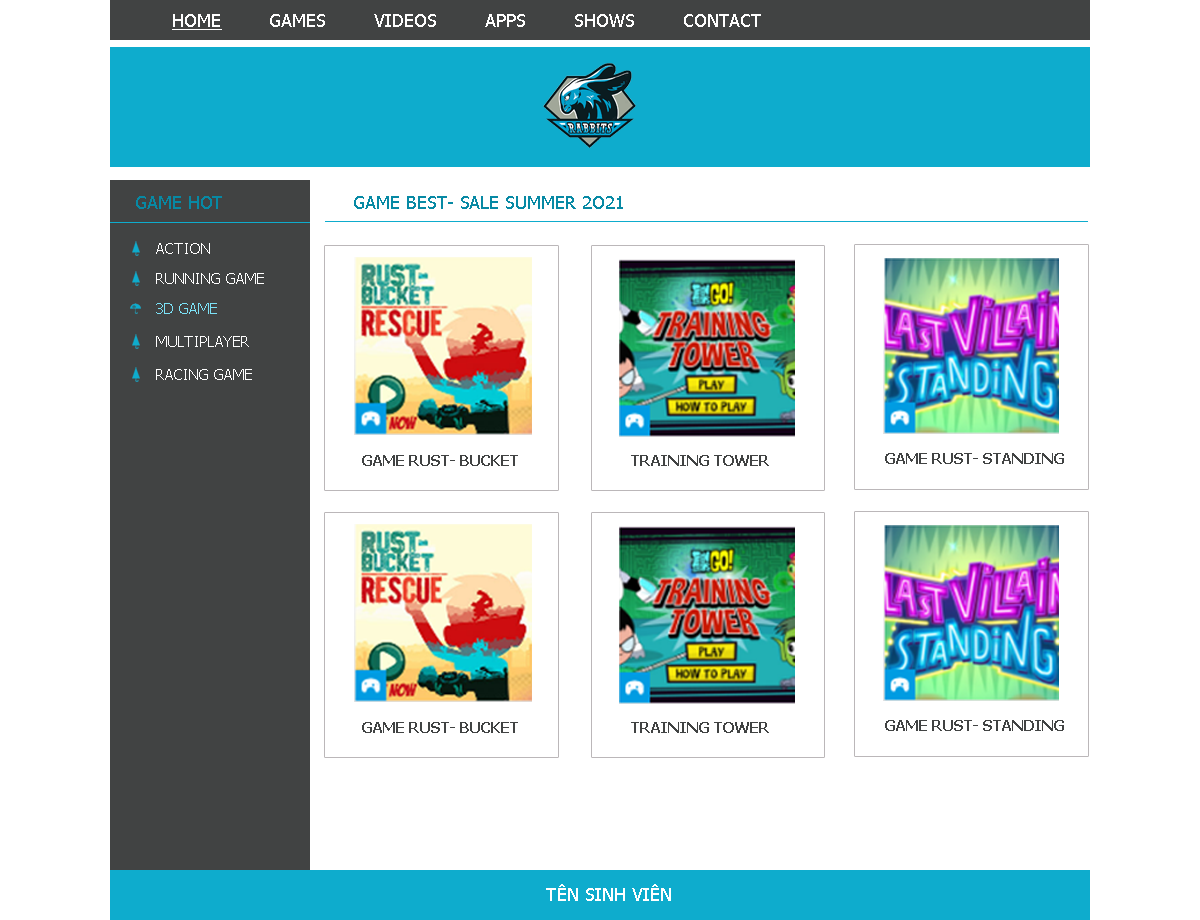
<style>
.page{position:relative;width:1200px;height:920px;background:#ffffff}
.page>*{position:absolute;margin:0}
.t1{font:18px "Tahoma";color:#ffffff}
.t2{font:18px "Tahoma";color:#ffffff;text-decoration:underline}
.t3{font:18px "Tahoma";color:#0789a4}
.t4{font:15px "Tahoma";color:#fefefe}
.t5{font:15px "Tahoma";color:#7ce2f7}
.t6{font:15px "Tahoma-Bold";color:#414343}
</style>
<div class="page">
<p class="t1" style="left:172px;top:14px;width:589px;height:16px"><span class="t2">HOME</span>        GAMES        VIDEOS        APPS        SHOWS        CONTACT</p>
<p class="t3" style="left:136px;top:196px;width:86px;height:13px">GAME HOT</p>
<p class="t3" style="left:354px;top:196px;width:269px;height:13px">GAME BEST- SALE SUMMER 2O21</p>
<p class="t4" style="left:156px;top:243px;width:54px;height:11px">ACTION</p>
<p class="t4" style="left:156px;top:273px;width:108px;height:11px">RUNNING GAME</p>
<p class="t5" style="left:156px;top:303px;width:61px;height:11px">3D GAME</p>
<p class="t4" style="left:156px;top:336px;width:93px;height:11px">MULTIPLAYER</p>
<p class="t4" style="left:156px;top:369px;width:96px;height:11px">RACING GAME</p>
<p class="t6" style="left:362px;top:455px;width:156px;height:11px">GAME RUST- BUCKET</p>
<p class="t6" style="left:631px;top:455px;width:138px;height:11px">TRAINING TOWER</p>
<p class="t6" style="left:885px;top:453px;width:179px;height:11px">GAME RUST- STANDING</p>
<p class="t6" style="left:362px;top:722px;width:156px;height:11px">GAME RUST- BUCKET</p>
<p class="t6" style="left:631px;top:722px;width:138px;height:11px">TRAINING TOWER</p>
<p class="t6" style="left:885px;top:720px;width:179px;height:11px">GAME RUST- STANDING</p>
<p class="t1" style="left:546px;top:884px;width:125px;height:17px">TÊN SINH VIÊN</p>
</div>
